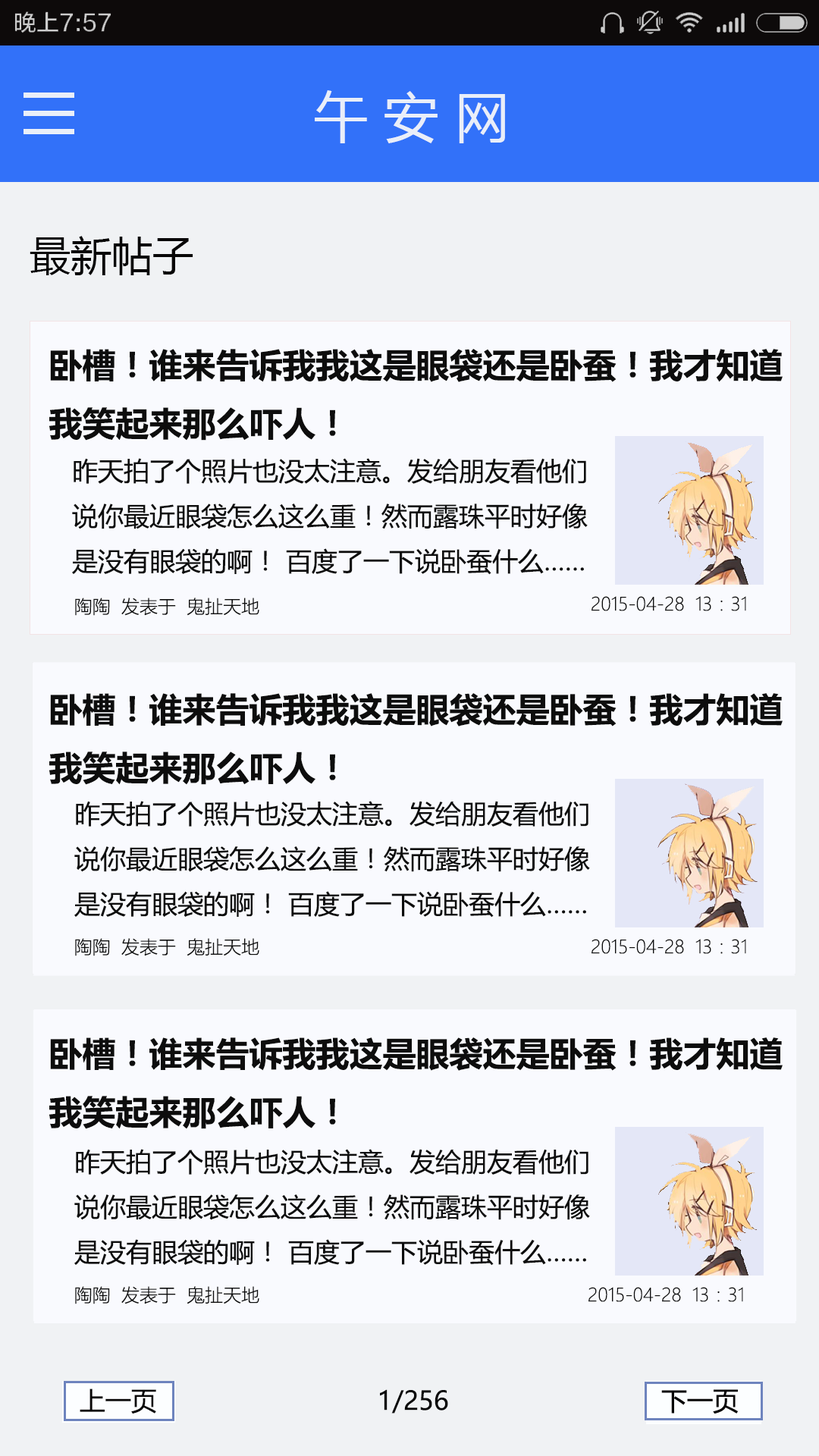
<style>
.page{position:relative;width:819px;height:1456px;background:#f9fafe}
.page>*{position:absolute;margin:0}
.t1{font:54.6px "MicrosoftYaHei";color:#e9eef9}
.t2{font:40.9px "MicrosoftYaHei";color:#080707}
.t3{font:33.4px "MicrosoftYaHei-Bold";color:#0d0d0d}
.t4{font:25.8px "MicrosoftYaHei";color:#0d0d0d}
.t5{font:18.2px "MicrosoftYaHeiLight";color:#0d0d0d}
.t6{font:25.8px "MicrosoftYaHei";color:#080707}
.t7{font:25.8px "MicrosoftYaHei";color:#080808}
</style>
<div class="page">
<p class="t1" style="left:315px;top:90px;width:190px;height:53px">午 安 网</p>
<p class="t2" style="left:30px;top:236px;width:163px;height:39px">最新帖子</p>
<p class="t3" style="left:49px;top:349px;width:734px;height:92px">卧槽！谁来告诉我我这是眼袋还是卧蚕！我才知道我笑起来那么吓人！</p>
<p class="t4" style="left:72px;top:458px;width:516px;height:117px">昨天拍了个照片也没太注意。发给朋友看他们说你最近眼袋怎么这么重！然而露珠平时好像是没有眼袋的啊！ 百度了一下说卧蚕什么……</p>
<p class="t5" style="left:75px;top:598px;width:184px;height:18px">陶陶  发表于  鬼扯天地</p>
<p class="t5" style="left:591px;top:596px;width:155px;height:15px">2015-04-28  13：31</p>
<p class="t3" style="left:49px;top:693px;width:734px;height:92px">卧槽！谁来告诉我我这是眼袋还是卧蚕！我才知道我笑起来那么吓人！</p>
<p class="t4" style="left:74px;top:801px;width:516px;height:117px">昨天拍了个照片也没太注意。发给朋友看他们说你最近眼袋怎么这么重！然而露珠平时好像是没有眼袋的啊！ 百度了一下说卧蚕什么……</p>
<p class="t5" style="left:75px;top:938px;width:184px;height:18px">陶陶  发表于  鬼扯天地</p>
<p class="t5" style="left:591px;top:939px;width:155px;height:15px">2015-04-28  13：31</p>
<p class="t3" style="left:49px;top:1037px;width:734px;height:92px">卧槽！谁来告诉我我这是眼袋还是卧蚕！我才知道我笑起来那么吓人！</p>
<p class="t4" style="left:74px;top:1149px;width:516px;height:117px">昨天拍了个照片也没太注意。发给朋友看他们说你最近眼袋怎么这么重！然而露珠平时好像是没有眼袋的啊！ 百度了一下说卧蚕什么……</p>
<p class="t5" style="left:75px;top:1286px;width:184px;height:18px">陶陶  发表于  鬼扯天地</p>
<p class="t5" style="left:588px;top:1287px;width:155px;height:15px">2015-04-28  13：31</p>
<p class="t6" style="left:80px;top:1388px;width:76px;height:26px">上一页</p>
<p class="t7" style="left:380px;top:1389px;width:68px;height:25px">1/256</p>
</div>
